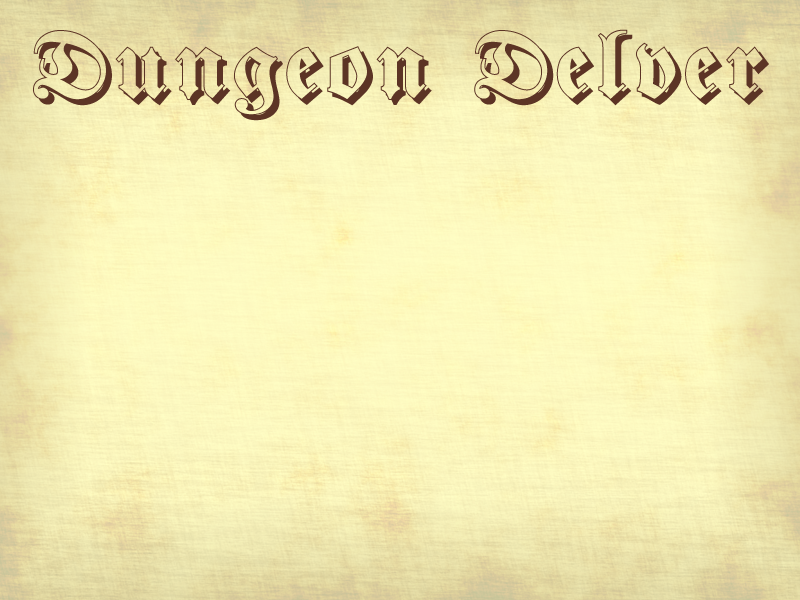
<style>
.page{position:relative;width:800px;height:600px}
.page>*{position:absolute;margin:0}
.t1{font:100px "Fraktur-Shadowed";color:#5c3425}
</style>
<div class="page">
<p class="t1" style="left:33px;top:29px;width:736px;height:92px">Dungeon Delver</p>
</div>
